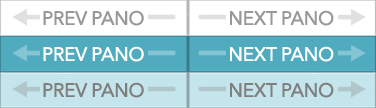
<style>
.page{position:relative;width:376px;height:108px;background:#ffffff}
.page>*{position:absolute;margin:0}
.t1{font:18.7px "AvenirNextLTPro-Regular";letter-spacing:-0.025em;color:#818181;text-transform:uppercase;font-weight:bold}
.t2{font:18.7px "AvenirNextLTPro-Regular";letter-spacing:-0.025em;color:#ffffff;text-transform:uppercase;font-weight:bold}
</style>
<div class="page">
<p class="t1" style="left:43px;top:10px;width:101px;height:16px">prev pano</p>
<p class="t1" style="left:230px;top:10px;width:104px;height:16px">next pano</p>
<p class="t2" style="left:43px;top:46px;width:101px;height:16px">prev pano</p>
<p class="t2" style="left:230px;top:46px;width:104px;height:16px">next pano</p>
<p class="t1" style="left:43px;top:82px;width:101px;height:16px">prev pano</p>
<p class="t1" style="left:230px;top:82px;width:104px;height:16px">next pano</p>
</div>
